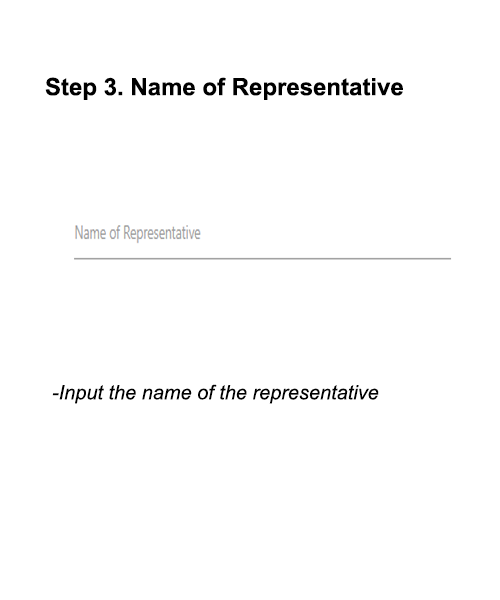
<style>
.page{position:relative;width:500px;height:600px;background:#ffffff}
.page>*{position:absolute;margin:0}
.t1{font:24px "Arial-BoldMT";color:#000000}
.t2{font:20px "Arial-ItalicMT";color:#000000}
</style>
<div class="page">
<p class="t1" style="left:45px;top:77px;width:358px;height:23px">Step 3. Name of Representative</p>
<p class="t2" style="left:52px;top:384px;width:327px;height:20px">-Input the name of the representative</p>
</div>
